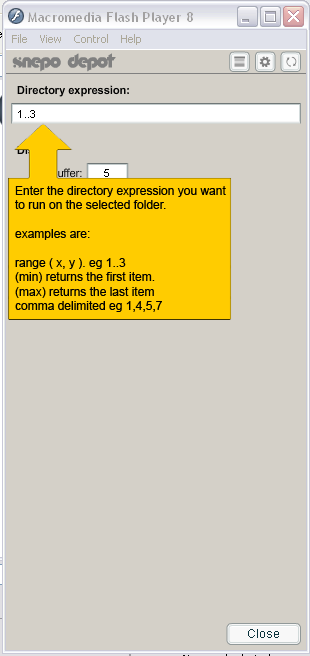
<style>
.page{position:relative;width:310px;height:656px;background:#d4d0c8}
.page>*{position:absolute;margin:0}
.t1{font:12px "ArialMT";color:#000000}
</style>
<div class="page">
<p class="t1" style="left:15px;top:186px;width:211px;height:126px">Enter the directory expression you want<br>to run on the selected folder.<br><br>examples are:<br><br>range ( x, y ). eg 1..3<br>(min) returns the first item.<br>(max) returns the last item<br>comma delimited eg 1,4,5,7</p>
</div>
